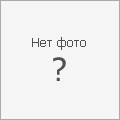
<style>
.page{position:relative;width:120px;height:120px;background:#f5f5f5}
.page>*{position:absolute;margin:0}
.t1{font:13px "Tahoma";color:#505050}
.t2{font:32px "Tahoma";color:#505050}
</style>
<div class="page">
<p class="t1" style="left:32px;top:37px;width:54px;height:13px">Нет фото</p>
<p class="t2" style="left:53px;top:57px;width:13px;height:24px">?</p>
</div>
